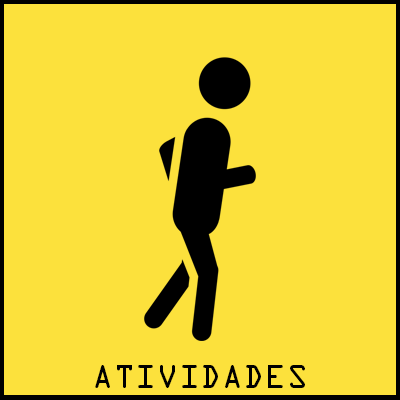
<style>
.page{position:relative;width:400px;height:400px;background:#fce13c}
.page>*{position:absolute;margin:0}
.t1{font:30px "OCRAStd";color:#000000}
</style>
<div class="page">
<p class="t1" style="left:95px;top:365px;width:210px;height:23px">ATIVIDADES</p>
</div>
